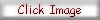
<style>
.page{position:relative;width:100px;height:20px}
.page>*{position:absolute;margin:0}
.t1{font:12px "ComicSansMS"}
</style>
<div class="page">
<p class="t1" style="left:18px;top:4px;width:63px;height:13px">Click Image</p>
</div>
